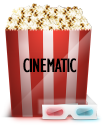
<style>
.page{position:relative;width:103px;height:128px;background:#ffffff}
.page>*{position:absolute;margin:0}
.t1{font:20px "GillSansMT-Condensed";letter-spacing:-0.06em;color:#000000;font-weight:bold}
</style>
<div class="page">
<p class="t1" style="left:23px;top:58px;width:54px;height:15px">CINEMATIC</p>
</div>
